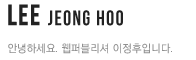
<style>
.page{position:relative;width:196px;height:60px;background:#ffffff}
.page>*{position:absolute;margin:0}
.t1{font:21px "BebasNeue";letter-spacing:0.07em;color:#222222;scale:0.95 1}
.t2{font:29px "BebasNeue";letter-spacing:0.03em;color:#222222;font-weight:bold;scale:0.95 1}
.t3{font:29px "BebasNeue";letter-spacing:0.09em;color:#222222;font-weight:bold;scale:0.95 1}
.t4{font:21px "BebasNeue";letter-spacing:0.09em;color:#222222;scale:0.95 1}
.t5{font:21px "BebasNeue";letter-spacing:0.08em;color:#222222;scale:0.95 1}
.t6{font:11px "THELuxGoM_U";color:#909090;scale:0.95 1}
</style>
<div class="page">
<p class="t1" style="left:8px;top:4px;width:115px;height:22px"><span class="t2">LE</span><span class="t3">E </span><span class="t4">J</span>EONG <span class="t5">HOO</span></p>
<p class="t6" style="left:8px;top:43px;width:164px;height:11px">안녕하세요. 웹퍼블리셔 이정후입니다.</p>
</div>
